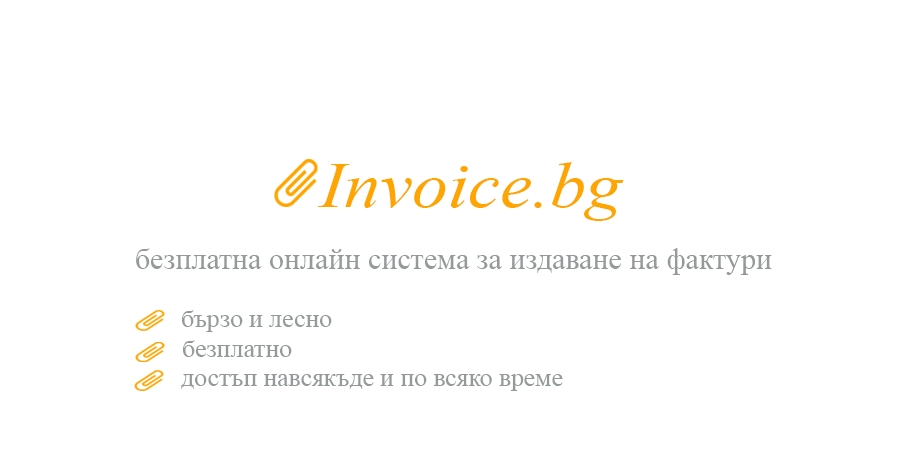
<style>
.page{position:relative;width:900px;height:450px;background:#ffffff}
.page>*{position:absolute;margin:0}
.t1{font:64.2px "TimesNewRomanPS-ItalicMT";color:#ffa500;scale:1.12 1}
.t2{font:29.9px "TimesNewRomanPSMT";color:#949999}
.t3{font:24.7px "TimesNewRomanPSMT";color:#949999;scale:1.04 1}
</style>
<div class="page">
<p class="t1" style="left:317px;top:162px;width:307px;height:59px">Invoice.bg</p>
<p class="t2" style="left:136px;top:248px;width:636px;height:27px">безплатна онлайн система за издаване на фактури</p>
<p class="t3" style="left:181px;top:310px;width:151px;height:22px">бързо и лесно</p>
<p class="t3" style="left:182px;top:340px;width:110px;height:17px">безплатно</p>
<p class="t3" style="left:181px;top:374px;width:382px;height:17px">достъп навсякъде и по всяко време</p>
</div>
